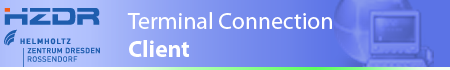
<style>
.page{position:relative;width:450px;height:70px}
.page>*{position:absolute;margin:0}
.t1{font:23.7px "MyriadPro-Regular";color:#ffffff}
.t2{font:23.7px "MyriadPro-Bold";color:#ffffff}
</style>
<div class="page">
<p class="t1" style="left:127px;top:12px;width:205px;height:45px">Terminal Connection<br><span class="t2">Client</span></p>
</div>
